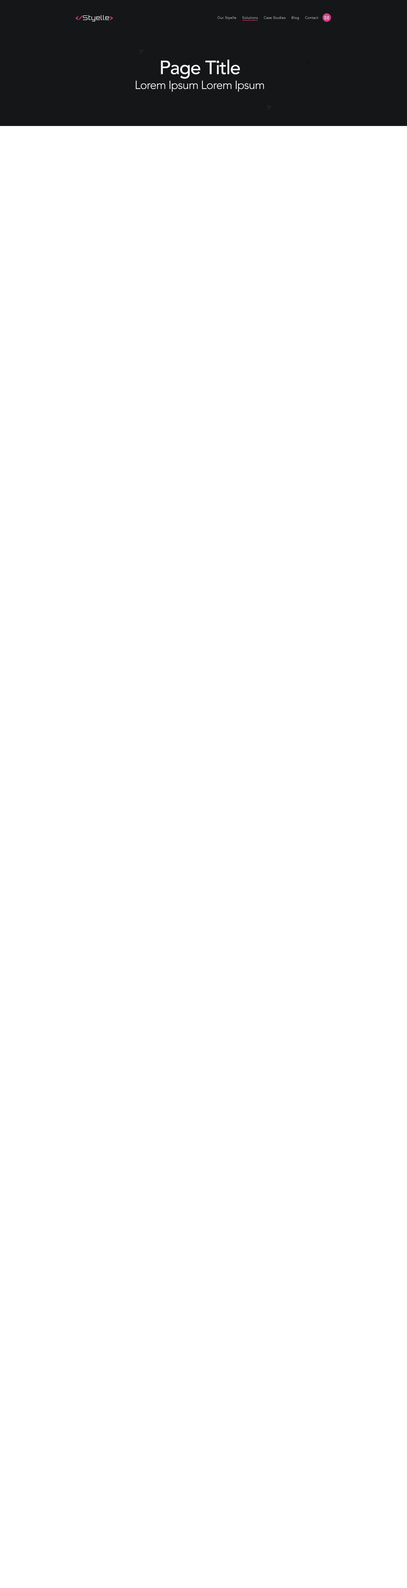
<style>
.page{position:relative;width:407px;height:1588px;background:#ffffff}
.page>*{position:absolute;margin:0}
.t1{font:6.4px "Orbitron-Regular";letter-spacing:0.06em;color:#f4f4f4}
.t2{font:6.4px "Orbitron-Bold";letter-spacing:0.06em;color:#d83f87}
.t3{font:3.4px "Avenir-Book";letter-spacing:0.06em;color:#f4f4f4}
.t4{font:19.1px "Avenir-Medium";letter-spacing:-0.03em;color:#f4f4f4}
.t5{font:11.6px "Avenir-Light";letter-spacing:-0.03em;color:#f4f4f4}
</style>
<div class="page">
<p class="t1" style="left:75px;top:15px;width:38px;height:7px"><span class="t2">&lt;/</span>Styelle<span class="t2">&gt;</span></p>
<p class="t3" style="left:217px;top:16px;width:101px;height:4px">Our Styelle     Solutions     Case Studies     Blog     Contact</p>
<p class="t4" style="left:161px;top:60px;width:79px;height:19px">Page Title</p>
<p class="t5" style="left:136px;top:81px;width:128px;height:11px">Lorem Ipsum Lorem Ipsum</p>
</div>
